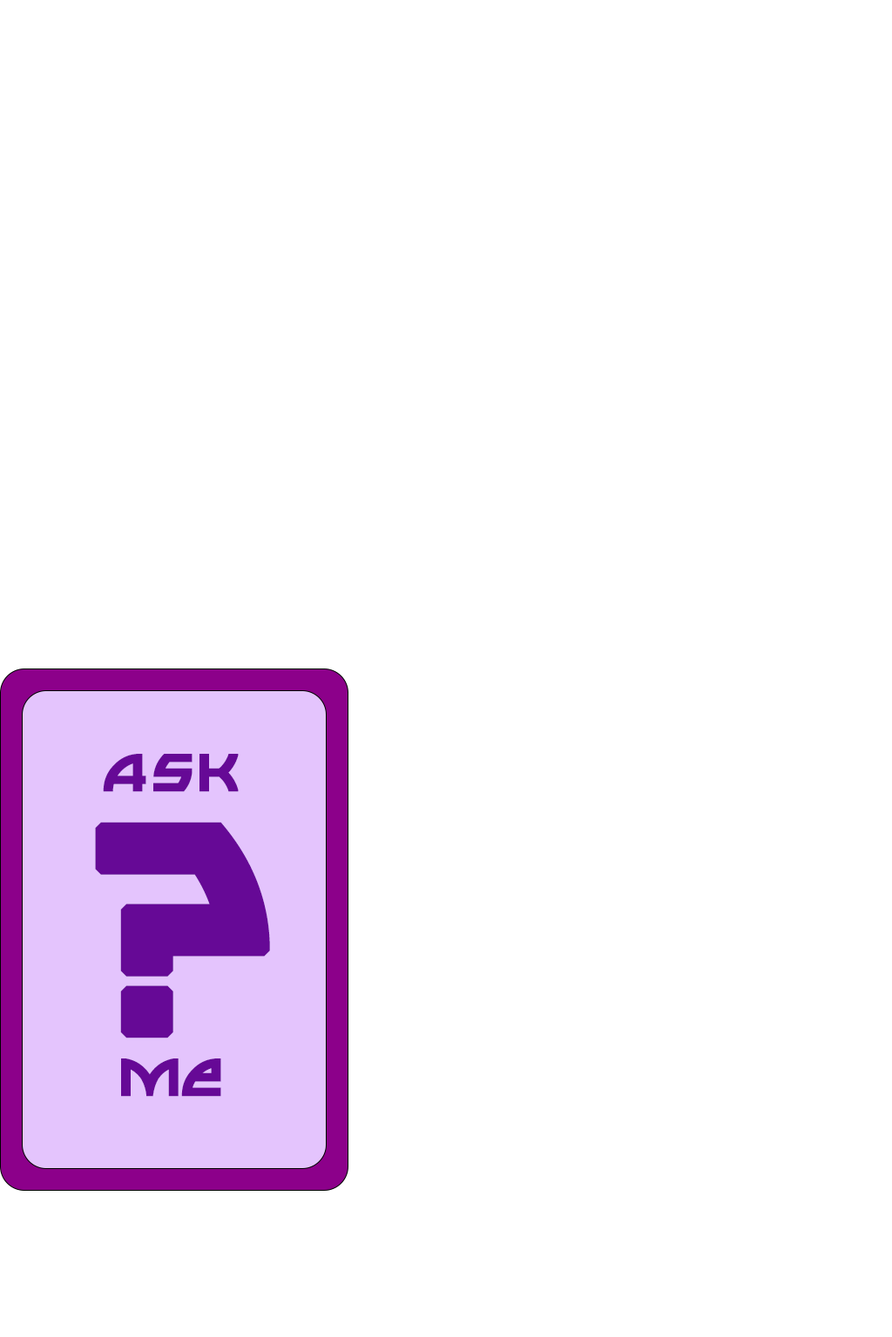
<style>
.page{position:relative;width:892px;height:1337px;background:#ffffff}
.page>*{position:absolute;margin:0}
.t1{font:75.1px "mr_Arounder-Arounder";color:#660996;text-transform:uppercase;font-weight:bold}
.t2{font:417.9px "mr_Arounder-Arounder";color:#660996;text-transform:uppercase;font-weight:bold}
</style>
<div class="page">
<p class="t1" style="left:103px;top:754px;width:136px;height:38px">ask</p>
<p class="t2" style="left:95px;top:822px;width:175px;height:217px">?</p>
<p class="t1" style="left:121px;top:1059px;width:100px;height:38px">me</p>
</div>
